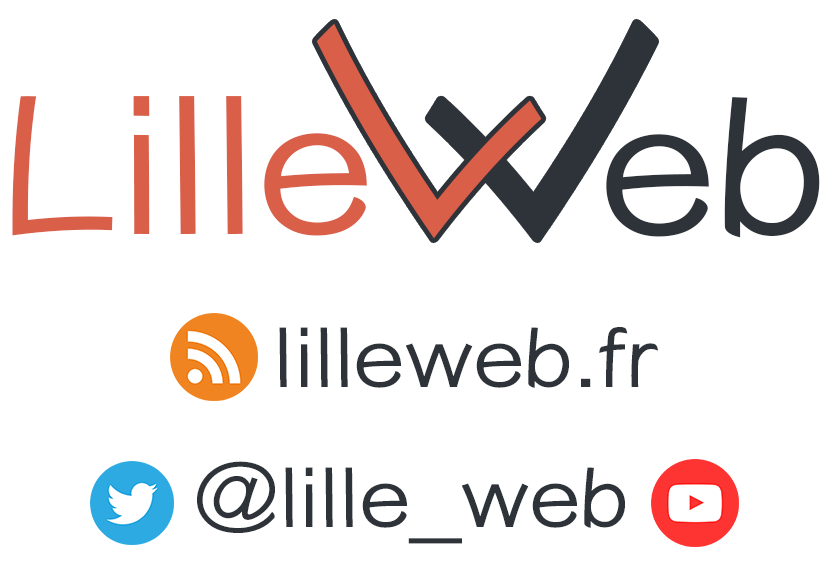
<style>
.page{position:relative;width:828px;height:581px;background:#ffffff}
.page>*{position:absolute;margin:0}
.t1{font:306.4px "YuppyTC-Regular";color:#d95f49;font-style:italic;scale:1.1 1}
.t2{font:306.4px "YuppyTC-Regular";color:#2d3339;font-style:italic;scale:1.1 1}
.t3{font:192px "YuppyTC-Regular";color:#d95f49;scale:1.1 1}
.t4{font:192px "YuppyTC-Regular";color:#2d3339;scale:1.1 1}
.t5{font:82.9px "YuppyTC-Regular";color:#2d3339;scale:1.1 1}
</style>
<div class="page">
<p class="t1" style="left:316px;top:23px;width:226px;height:216px;rotate:-45deg">L</p>
<p class="t2" style="left:429px;top:23px;width:226px;height:216px;rotate:-135deg">L</p>
<p class="t3" style="left:12px;top:96px;width:355px;height:140px">Lille</p>
<p class="t4" style="left:606px;top:97px;width:214px;height:141px">eb</p>
<p class="t5" style="left:279px;top:327px;width:379px;height:61px">lilleweb.fr</p>
<p class="t5" style="left:197px;top:461px;width:428px;height:83px">@lille_web</p>
</div>
